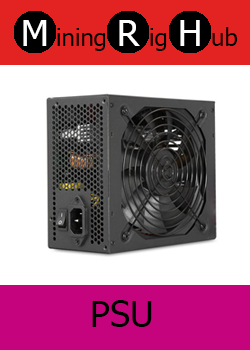
<style>
.page{position:relative;width:250px;height:350px;background:#ffffff}
.page>*{position:absolute;margin:0}
.t1{font:36px "Tahoma";color:#ffffff}
.t2{font:24px "Tahoma";color:#000000}
.t3{font:36px "Tahoma";color:#000000}
</style>
<div class="page">
<p class="t1" style="left:23px;top:20px;width:24px;height:26px">M</p>
<p class="t2" style="left:57px;top:28px;width:49px;height:23px">ining</p>
<p class="t1" style="left:119px;top:20px;width:21px;height:26px">R</p>
<p class="t2" style="left:150px;top:28px;width:17px;height:23px">ig</p>
<p class="t1" style="left:180px;top:20px;width:20px;height:26px">H</p>
<p class="t2" style="left:212px;top:27px;width:26px;height:19px">ub</p>
<p class="t3" style="left:92px;top:300px;width:60px;height:27px">PSU</p>
</div>
